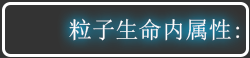
<style>
.page{position:relative;width:250px;height:58px;background:#333333}
.page>*{position:absolute;margin:0}
.t1{font:23.2px "SimSun";color:#fdfdfd}
</style>
<div class="page">
<p class="t1" style="left:69px;top:18px;width:171px;height:23px">粒子生命内属性:</p>
</div>
